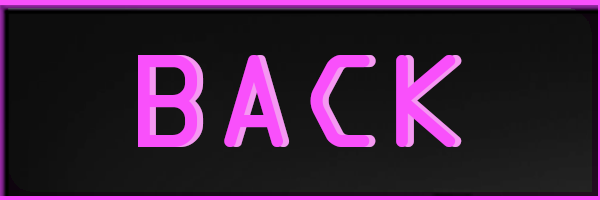
<style>
.page{position:relative;width:600px;height:200px}
.page>*{position:absolute;margin:0}
.t1{font:142px "OCRAExtended";color:#f950fb}
.t2{font:142px "OCRAExtended"}
</style>
<div class="page">
<p class="t1" style="left:138px;top:55px;width:318px;height:92px">BACK</p>
<p class="t2" style="left:144px;top:55px;width:318px;height:92px">BACK</p>
</div>
